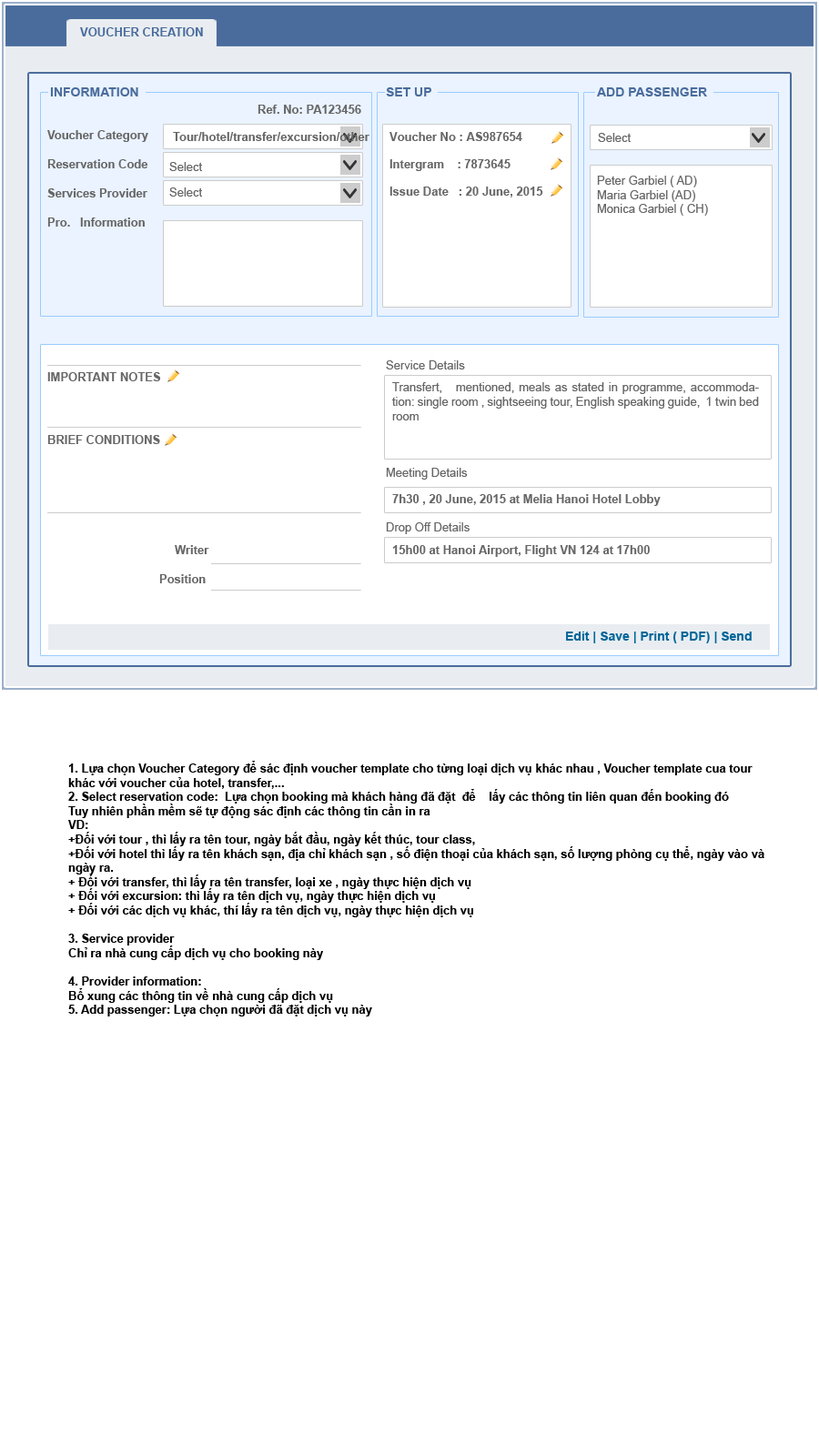
<style>
.page{position:relative;width:819px;height:1456px;background:#ffffff}
.page>*{position:absolute;margin:0}
.t1{font:11.8px "Arial-BoldMT";color:#4a6c9c}
.t2{font:12.7px "Arial-BoldMT";color:#4a6c9c}
.t3{font:11.8px "Arial-BoldMT";color:#666666}
.t4{font:11.8px/29.1px "Arial-BoldMT";color:#666666}
.t5{font:11.8px/23.7px "Arial-BoldMT";color:#666666}
.t6{font:11.8px/25.5px "Arial-BoldMT";color:#666666}
.t7{font:11.8px/27.3px "Arial-BoldMT";color:#666666}
.t8{font:11.8px "ArialMT";color:#666666}
.t9{font:12.7px "Arial-BoldMT";color:#006699}
.t10{font:11.8px/14.2px "Arial-BoldMT";color:#000000}
</style>
<div class="page">
<p class="t1" style="left:80px;top:27px;width:123px;height:9px">VOUCHER CREATION</p>
<p class="t2" style="left:50px;top:87px;width:88px;height:9px">INFORMATION</p>
<p class="t2" style="left:386px;top:87px;width:45px;height:9px">SET UP</p>
<p class="t2" style="left:597px;top:87px;width:110px;height:9px">ADD PASSENGER</p>
<p class="t3" style="left:258px;top:105px;width:103px;height:9px">Ref. No: PA123456</p>
<p class="t4" style="left:47px;top:130px;width:101px;height:97px;text-align:justify"><span class="t5"><br></span><span class="t6">Voucher Category <br></span>Reservation Code<br>Services Provider<br>Pro.   Information</p>
<p class="t3" style="left:173px;top:132px;width:196px;height:9px">Tour/hotel/transfer/excursion/other</p>
<p class="t7" style="left:389px;top:132px;width:154px;height:65px;text-align:justify">Voucher No : AS987654<br>Intergram    : 7873645<br>Issue Date   : 20 June, 2015</p>
<p class="t8" style="left:598px;top:133px;width:34px;height:9px">Select</p>
<p class="t8" style="left:169px;top:162px;width:34px;height:9px">Select</p>
<p class="t8" style="left:597px;top:176px;width:111px;height:40px;text-align:justify">Peter Garbiel ( AD)<br>Maria Garbiel (AD)<br>Monica Garbiel ( CH)</p>
<p class="t8" style="left:169px;top:187px;width:34px;height:10px">Select</p>
<p class="t8" style="left:386px;top:360px;width:79px;height:9px">Service Details</p>
<p class="t3" style="left:47px;top:372px;width:114px;height:9px">IMPORTANT NOTES</p>
<p class="t8" style="left:392px;top:382px;width:367px;height:38px;text-align:justify">Transfert,   mentioned, meals as stated in programme, accommodation: single room , sightseeing tour, English speaking guide,  1 twin bed room</p>
<p class="t3" style="left:47px;top:435px;width:113px;height:9px">BRIEF CONDITIONS</p>
<p class="t8" style="left:386px;top:468px;width:82px;height:12px">Meeting Details</p>
<p class="t3" style="left:392px;top:494px;width:269px;height:12px">7h30 , 20 June, 2015 at Melia Hanoi Hotel Lobby</p>
<p class="t8" style="left:386px;top:522px;width:84px;height:12px">Drop Off Details</p>
<p class="t3" style="left:175px;top:545px;width:34px;height:9px">Writer</p>
<p class="t3" style="left:392px;top:545px;width:258px;height:12px">15h00 at Hanoi Airport, Flight VN 124 at 17h00</p>
<p class="t3" style="left:159px;top:574px;width:47px;height:9px">Position</p>
<p class="t9" style="left:566px;top:632px;width:186px;height:11px">Edit | Save | Print ( PDF) | Send</p>
<p class="t10" style="left:68px;top:761px;width:696px;height:255px;text-align:justify">1. Lựa chọn Voucher Category để sác định voucher template cho từng loại dịch vụ khác nhau , Voucher template cua tour <br>khác với voucher của hotel, transfer,...<br>2. Select reservation code:  Lựa chọn booking mà khách hàng đã đặt  để    lấy các thông tin liên quan đến booking đó<br>Tuy nhiên phần mềm sẽ tự động sác định các thông tin cần in ra<br>VD: <br>+Đối với tour , thì lấy ra tên tour, ngày bắt đầu, ngày kết thúc, tour class, <br>+Đối với hotel thì lấy ra tên khách sạn, địa chỉ khách sạn , số điện thoại của khách sạn, số lượng phòng cụ thể, ngày vào và <br>ngày ra.<br>+ Đối với transfer, thì lấy ra tên transfer, loại xe , ngày thực hiện dịch vụ<br>+ Đối với excursion: thì lấy ra tên dịch vụ, ngày thực hiện dịch vụ<br>+ Đối với các dịch vụ khác, thí lấy ra tên dịch vụ, ngày thực hiện dịch vụ<br><br>3. Service provider<br>Chỉ ra nhà cung cấp dịch vụ cho booking này<br><br>4. Provider information:<br>Bổ xung các thông tin về nhà cung cấp dịch vụ<br>5. Add passenger: Lựa chọn người đã đặt dịch vụ này</p>
</div>
